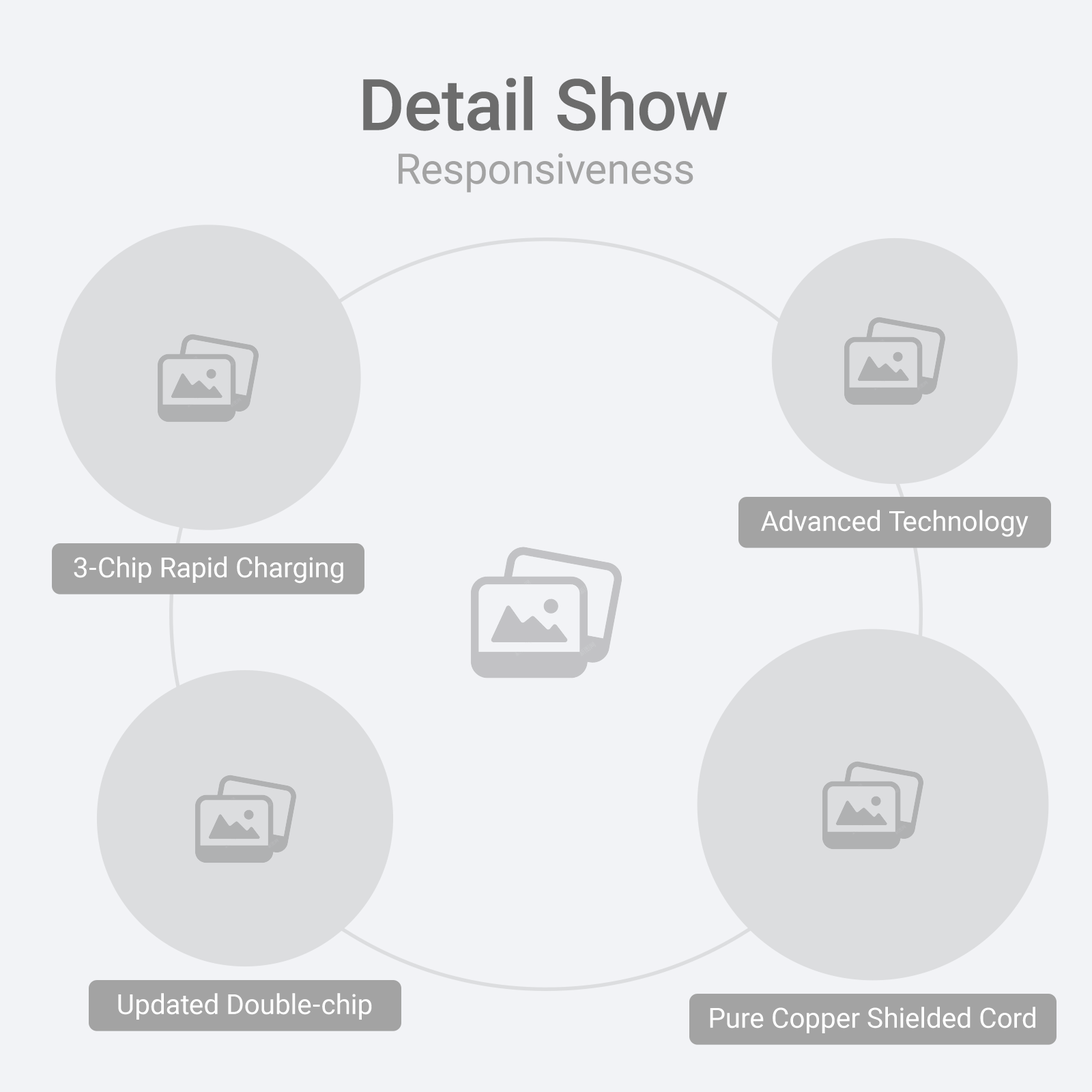
<style>
.page{position:relative;width:1092px;height:1092px;background:#f2f3f6}
.page>*{position:absolute;margin:0}
.t1{font:71.3px "Roboto-Medium";color:#6c6c6c}
.t2{font:42.2px "Roboto-Regular";color:#a3a3a3}
.t3{font:27.7px "Roboto-Regular";color:#ffffff}
</style>
<div class="page">
<p class="t1" style="left:363px;top:76px;width:365px;height:55px">Detail Show</p>
<p class="t2" style="left:399px;top:153px;width:294px;height:39px">Responsiveness</p>
<p class="t3" style="left:761px;top:510px;width:268px;height:27px">Advanced Technology</p>
<p class="t3" style="left:74px;top:556px;width:269px;height:28px">3-Chip Rapid Charging</p>
<p class="t3" style="left:118px;top:993px;width:254px;height:27px">Updated Double-chip</p>
<p class="t3" style="left:710px;top:1007px;width:325px;height:26px">Pure Copper Shielded Cord</p>
</div>
